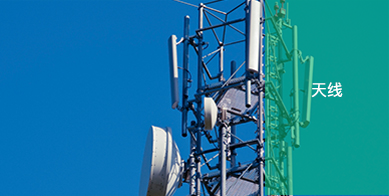
<style>
.page{position:relative;width:389px;height:196px}
.page>*{position:absolute;margin:0}
.t1{font:16px "PingFangSC-Medium";color:#feffff}
</style>
<div class="page">
<p class="t1" style="left:311px;top:82px;width:32px;height:16px">天线</p>
</div>
